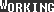
<style>
.page{position:relative;width:54px;height:12px;background:#333333}
.page>*{position:absolute;margin:0}
.t1{font:15.8px "FixedsysExcelsiorIIIb";color:#ffffff}
</style>
<div class="page">
<p class="t1" style="left:0px;top:0px;width:7px;height:9px">W</p>
<p class="t1" style="left:8px;top:3px;width:6px;height:9px">O</p>
<p class="t1" style="left:16px;top:3px;width:6px;height:9px">R</p>
<p class="t1" style="left:24px;top:3px;width:6px;height:9px">K</p>
<p class="t1" style="left:33px;top:3px;width:4px;height:9px">I</p>
<p class="t1" style="left:40px;top:3px;width:7px;height:9px">N</p>
<p class="t1" style="left:48px;top:3px;width:6px;height:9px">G</p>
</div>
